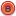
<style>
.page{position:relative;width:16px;height:16px}
.page>*{position:absolute;margin:0}
.t1{font:8px "ArialMT";color:#383838;font-weight:bold;scale:1.18 1}
</style>
<div class="page">
<p class="t1" style="left:5px;top:5px;width:6px;height:7px">B</p>
</div>
